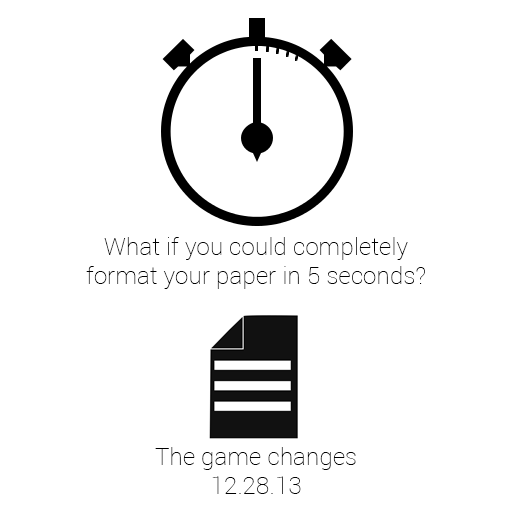
<style>
.page{position:relative;width:512px;height:512px;background:#ffffff}
.page>*{position:absolute;margin:0}
.t1{font:24px "Roboto-Thin";letter-spacing:0.01em;color:#000000}
</style>
<div class="page">
<p class="t1" style="left:86px;top:237px;width:339px;height:52px;text-align:center">What if you could completely <br>format your paper in 5 seconds?</p>
<p class="t1" style="left:155px;top:447px;width:201px;height:47px;text-align:center">The game changes<br>12.28.13</p>
</div>
